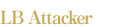
<style>
.page{position:relative;width:132px;height:27px;background:#ffffff}
.page>*{position:absolute;margin:0}
.t1{font:18px "RyuminPro-ExBold";letter-spacing:-0.08em;color:#c4a956}
</style>
<div class="page">
<p class="t1" style="left:0px;top:10px;width:93px;height:15px">LB Attacker</p>
</div>
